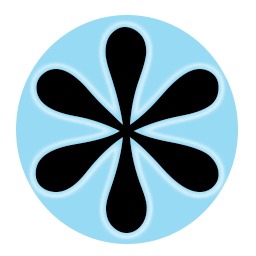
<style>
.page{position:relative;width:256px;height:256px;background:#ffffff}
.page>*{position:absolute;margin:0}
.t1{font:500px "Baskerville";color:#000000}
</style>
<div class="page">
<p class="t1" style="left:35px;top:27px;width:184px;height:206px">*</p>
</div>
